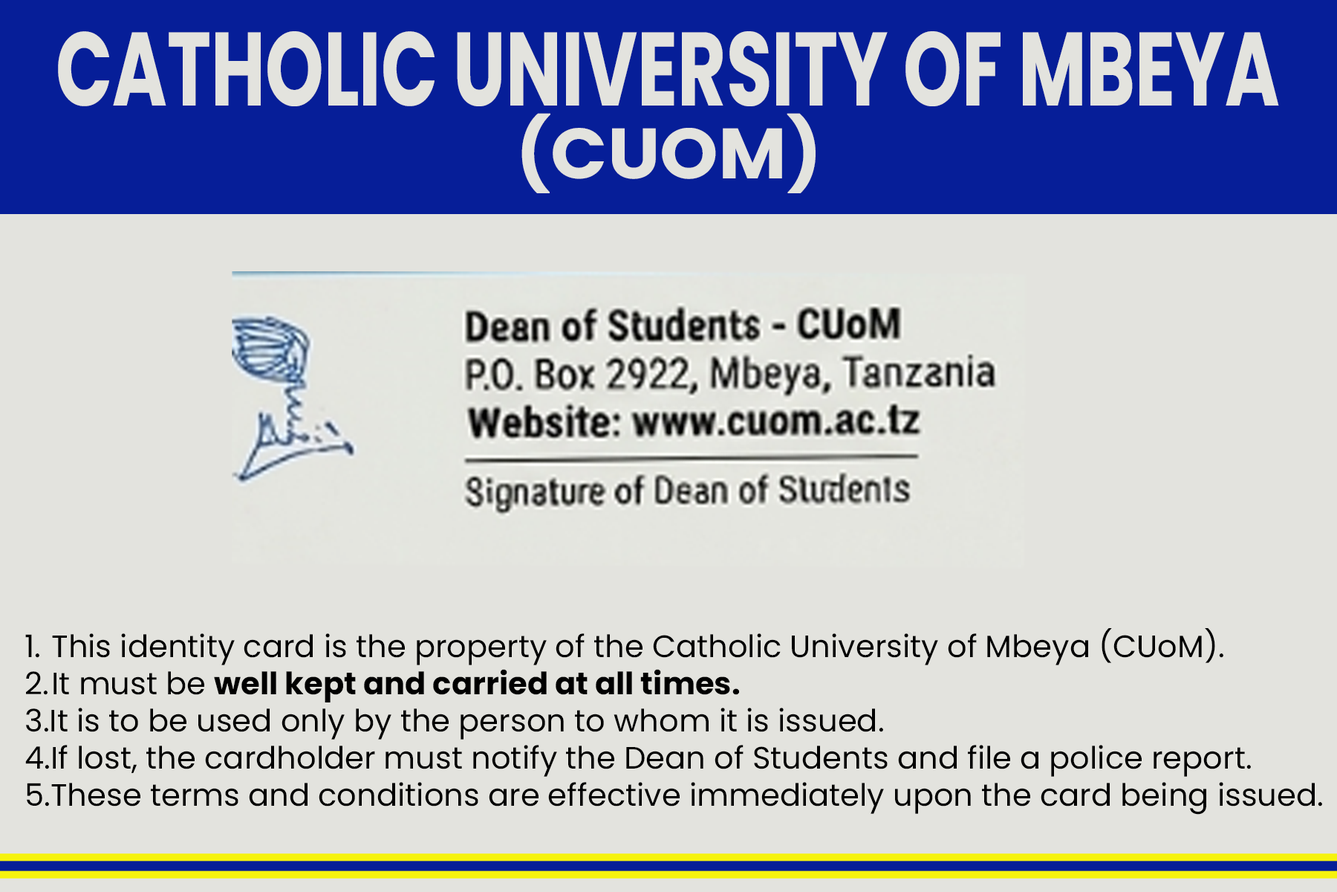
<style>
.page{position:relative;width:1337px;height:892px;background:#e3e3de}
.page>*{position:absolute;margin:0}
.t1{font:104.2px "Poppins-Bold";color:#e3e3de;scale:0.71 1}
.t2{font:71.1px "Poppins-Bold";color:#e3e3de;scale:1.05 1}
.t3{font:31px "Poppins-Regular";color:#000000}
.t4{font:31px "Poppins-Bold";color:#000000}
</style>
<div class="page">
<p class="t1" style="left:58px;top:31px;width:1221px;height:75px">CATHOLIC UNIVERSITY OF MBEYA</p>
<p class="t2" style="left:522px;top:113px;width:294px;height:80px">(CUOM)</p>
<p class="t3" style="left:25px;top:628px;width:1298px;height:186px">1. This identity card is the property of the Catholic University of Mbeya (CUoM).<br>2. It must be <span class="t4">well kept and carried at all times.<br></span>3.It is to be used only by the person to whom it is issued.<br>4.If lost, the cardholder must notify the Dean of Students and file a police report.<br>5.These terms and conditions are effective immediately upon the card being issued.</p>
</div>
